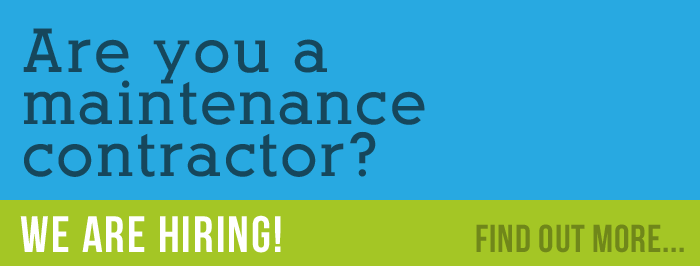
<style>
.page{position:relative;width:700px;height:266px;background:#28a9e1}
.page>*{position:absolute;margin:0}
.t1{font:61px/52px "AlexandriaFLF-Bold";letter-spacing:0.04em;color:#17485d}
.t2{font:51px "BebasNeue";letter-spacing:0.04em;color:#ffffff}
.t3{font:39px "BebasNeue";letter-spacing:0.02em;color:#70871a}
</style>
<div class="page">
<p class="t1" style="left:23px;top:28px;width:402px;height:149px">Are you a<br>maintenance<br>contractor?</p>
<p class="t2" style="left:20px;top:215px;width:261px;height:38px">We are hiring!</p>
<p class="t3" style="left:476px;top:224px;width:208px;height:29px">Find out more...</p>
</div>
